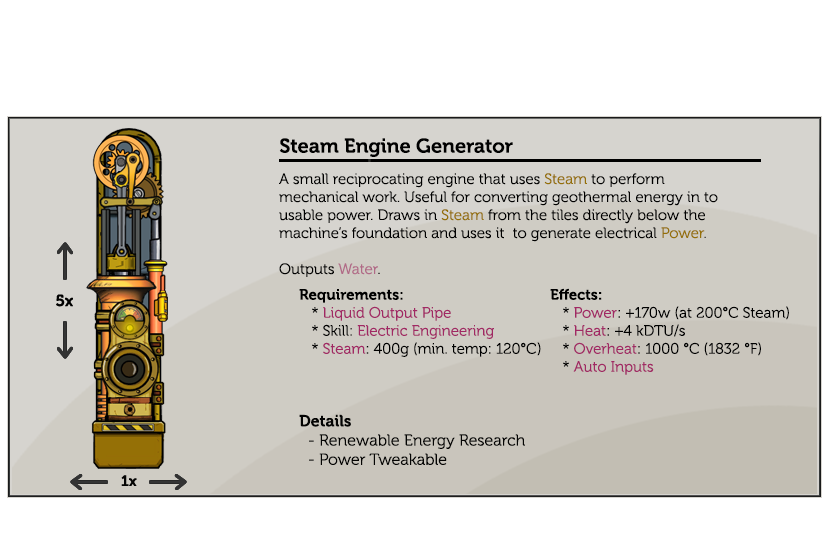
<style>
.page{position:relative;width:830px;height:550px;background:#ffffff}
.page>*{position:absolute;margin:0}
.t1{font:20px "Museo-700";color:#000000}
.t2{font:15px "Museo-300";color:#000000}
.t3{font:15px "Museo-300";color:#957006}
.t4{font:15px "Museo-300";color:#b16a87}
.t5{font:15px "Museo-700";color:#000000}
.t6{font:15px "Museo-300";color:#a12864}
.t7{font:16px "Museo-300";color:#040403}
.t8{font:16px "Museo-700";color:#040403}
</style>
<div class="page">
<p class="t1" style="left:279px;top:138px;width:234px;height:19px">Steam Engine Generator</p>
<p class="t2" style="left:279px;top:173px;width:439px;height:104px">A small reciprocating engine that uses <span class="t3">Steam</span> to perform mechanical work. Useful for converting geothermal energy in to usable power. Draws in <span class="t3">Steam</span> from the tiles directly below the machine’s foundation and uses it  to generate electrical <span class="t3">Power</span>.<br><br>Outputs <span class="t4">Water</span>.</p>
<p class="t2" style="left:299px;top:289px;width:242px;height:68px"><span class="t5">Requirements:<br></span>   * <span class="t6">Liquid Output Pipe<br></span>   * Skill: <span class="t6">Electric Engineering<br></span>   * <span class="t6">Steam</span>: 400g (min. temp: 120°C)</p>
<p class="t2" style="left:550px;top:288px;width:239px;height:87px"><span class="t5">Effects:</span><br>   * <span class="t6">Power</span>: +170w (at 200°C Steam)                   <br>   * <span class="t6">Heat</span>: +4 kDTU/s<br>   * <span class="t6">Overheat</span>: 1000 °C (1832 °F)<br>   * <span class="t6">Auto Inputs</span></p>
<p class="t7" style="left:299px;top:414px;width:226px;height:51px"><span class="t8">Details<br></span>  - Renewable Energy Research<br>  - Power Tweakable</p>
</div>
